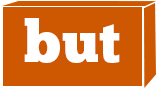
<style>
.page{position:relative;width:160px;height:88px;background:#ce5802}
.page>*{position:absolute;margin:0}
.t1{font:58.5px "ChunkFive-Regular";color:#ffffff}
</style>
<div class="page">
<p class="t1" style="left:24px;top:18px;width:96px;height:45px">but</p>
</div>
